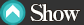
<style>
.page{position:relative;width:84px;height:25px;background:#333333}
.page>*{position:absolute;margin:0}
.t1{font:22px "RyuminPro-ExBold";letter-spacing:-0.08em;color:#fffffd}
</style>
<div class="page">
<p class="t1" style="left:30px;top:4px;width:50px;height:17px">Show</p>
</div>
